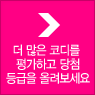
<style>
.page{position:relative;width:95px;height:95px;background:#ff0084}
.page>*{position:absolute;margin:0}
.t1{font:12.7px/14px "YDIYGO330";letter-spacing:-0.05em;color:#ffffff;scale:0.91 1}
</style>
<div class="page">
<p class="t1" style="left:6px;top:44px;width:84px;height:40px;text-align:center">더 많은 코디를 <br>평가하고 당첨<br>등급을 올려보세요</p>
</div>
